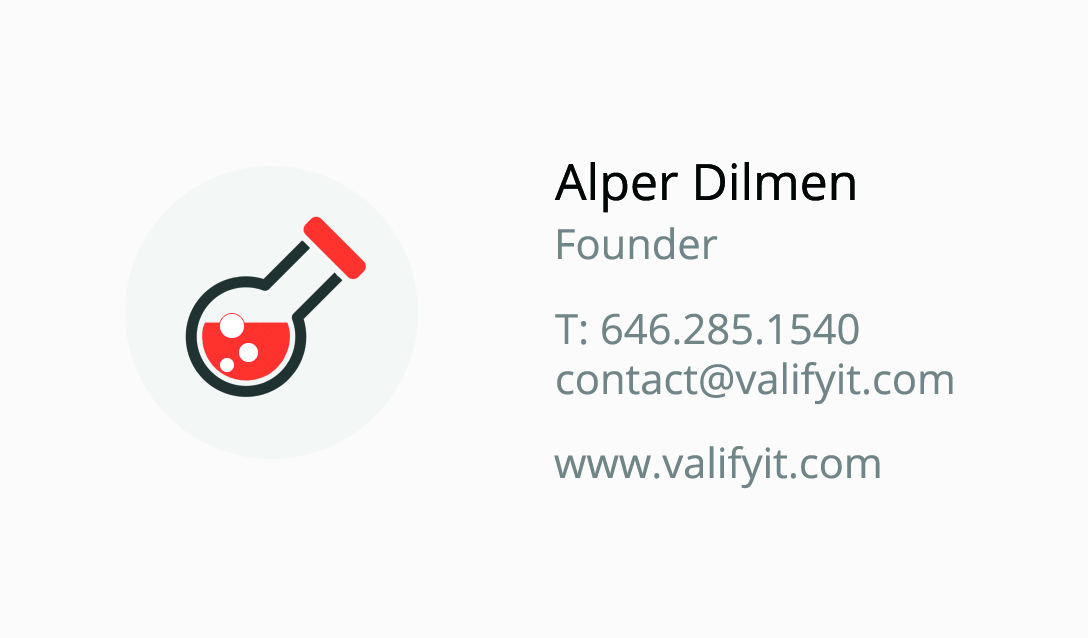
<style>
.page{position:relative;width:1088px;height:638px;background:#fafbfa}
.page>*{position:absolute;margin:0}
.t1{font:50px "OpenSans";color:#020606}
.t2{font:41.7px "OpenSans";color:#708588}
</style>
<div class="page">
<p class="t1" style="left:554px;top:162px;width:301px;height:51px">Alper Dilmen</p>
<p class="t2" style="left:558px;top:227px;width:160px;height:33px">Founder</p>
<p class="t2" style="left:555px;top:313px;width:304px;height:32px">T: 646.285.1540</p>
<p class="t2" style="left:557px;top:362px;width:396px;height:43px">contact@valifyit.com</p>
<p class="t2" style="left:554px;top:446px;width:326px;height:43px">www.valifyit.com</p>
</div>
